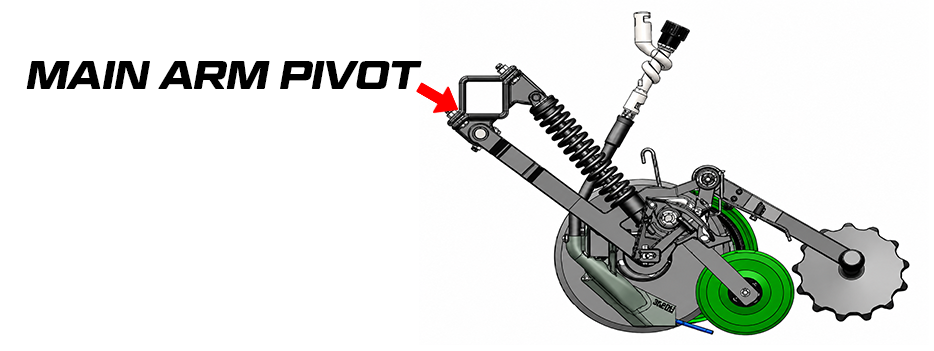
<style>
.page{position:relative;width:934px;height:351px;background:#ffffff}
.page>*{position:absolute;margin:0}
.t1{font:40px "GeomGraphic-BoldItalic";letter-spacing:-0.02em;color:#000000;text-transform:uppercase}
</style>
<div class="page">
<p class="t1" style="left:26px;top:61px;width:396px;height:28px">MAIN ARM PIVOT</p>
</div>
